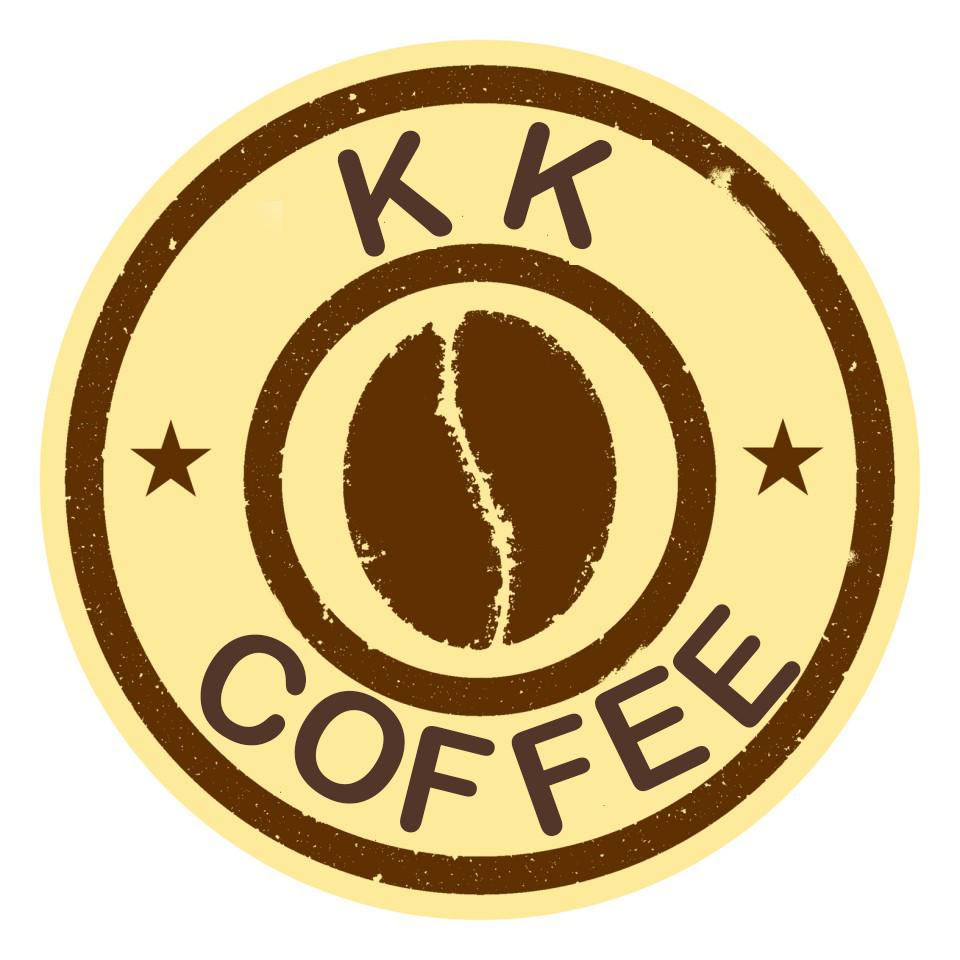
<style>
.page{position:relative;width:960px;height:960px;background:#ffffff}
.page>*{position:absolute;margin:0}
.t1{font:150px "ArialRoundedMTBold";color:#513629}
</style>
<div class="page">
<p class="t1" style="left:503px;top:122px;width:109px;height:128px;rotate:16deg">K</p>
<p class="t1" style="left:337px;top:130px;width:116px;height:127px;rotate:-17deg">K</p>
<p class="t1" style="left:673px;top:604px;width:128px;height:124px;rotate:-50deg">E</p>
<p class="t1" style="left:200px;top:634px;width:106px;height:112px;rotate:28deg">C</p>
<p class="t1" style="left:595px;top:665px;width:115px;height:127px;rotate:-26deg">E</p>
<p class="t1" style="left:294px;top:690px;width:111px;height:114px;rotate:32deg">O</p>
<p class="t1" style="left:511px;top:713px;width:80px;height:124px;rotate:-20deg">F</p>
<p class="t1" style="left:400px;top:725px;width:95px;height:108px;rotate:14deg">F</p>
</div>
